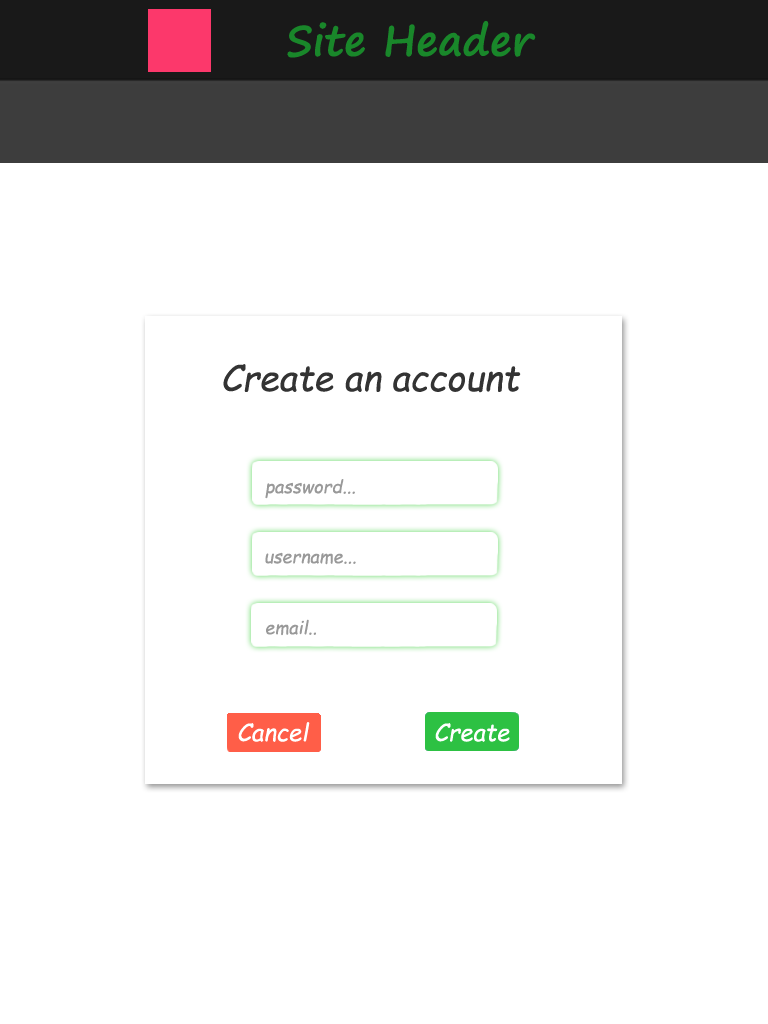
<style>
.page{position:relative;width:768px;height:1024px;background:#ffffff}
.page>*{position:absolute;margin:0}
.t1{font:41.8px "SegoePrint-Bold";color:#19872a}
.t2{font:35.7px "ComicSansMS-Italic";color:#333333}
.t3{font:18px "ComicSansMS-Italic";color:#999999}
.t4{font:24px "ComicSansMS-Italic";color:#ffffff}
</style>
<div class="page">
<p class="t1" style="left:287px;top:20px;width:249px;height:38px">Site Header</p>
<p class="t2" style="left:223px;top:364px;width:298px;height:29px">Create an account</p>
<p class="t3" style="left:265px;top:479px;width:90px;height:20px">password...</p>
<p class="t3" style="left:265px;top:552px;width:91px;height:13px">username...</p>
<p class="t3" style="left:266px;top:619px;width:50px;height:17px">email..</p>
<p class="t4" style="left:238px;top:722px;width:72px;height:20px">Cancel</p>
<p class="t4" style="left:435px;top:723px;width:75px;height:19px">Create</p>
</div>
